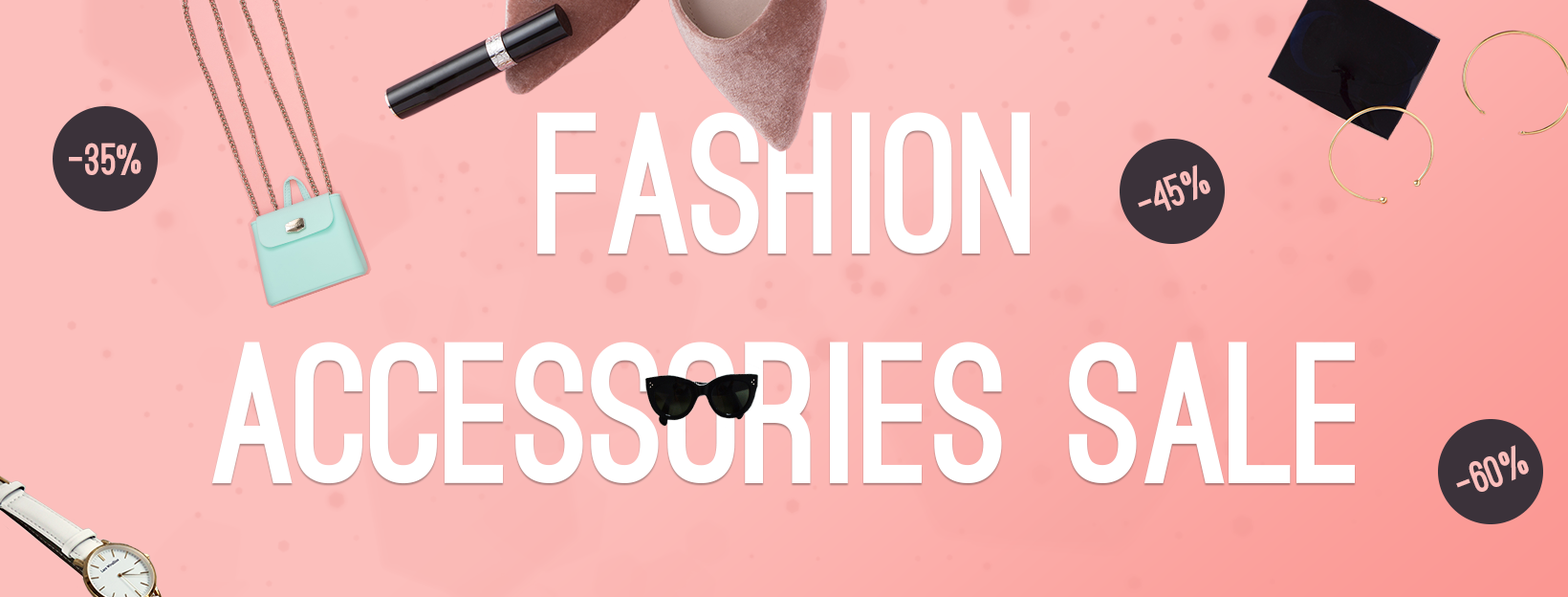
<style>
.page{position:relative;width:1568px;height:597px;background:#fcbfbc}
.page>*{position:absolute;margin:0}
.t1{font:191.2px "OstrichSans-Black";color:#ffffff}
.t2{font:43px "OstrichSans-Black";color:#fcbfbc}
</style>
<div class="page">
<p class="t1" style="left:211px;top:112px;width:1144px;height:372px;text-align:center">Fashion<br>accessories sale</p>
<p class="t2" style="left:69px;top:142px;width:73px;height:33px">-35%</p>
<p class="t2" style="left:1138px;top:164px;width:72px;height:47px;rotate:-21deg">-45%</p>
<p class="t2" style="left:1456px;top:445px;width:73px;height:46px;rotate:-21deg">-60%</p>
</div>
